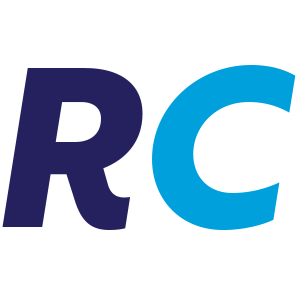
<style>
.page{position:relative;width:300px;height:300px;background:#ffffff}
.page>*{position:absolute;margin:0}
.t1{font:221.4px "Brother-1816-ExtraBold-Italic";letter-spacing:-0.025em;color:#25215f}
.t2{font:221.4px "Brother-1816-ExtraBold-Italic";letter-spacing:-0.025em;color:#00a0dd}
</style>
<div class="page">
<p class="t1" style="left:2px;top:65px;width:294px;height:165px">R<span class="t2">C</span></p>
</div>
